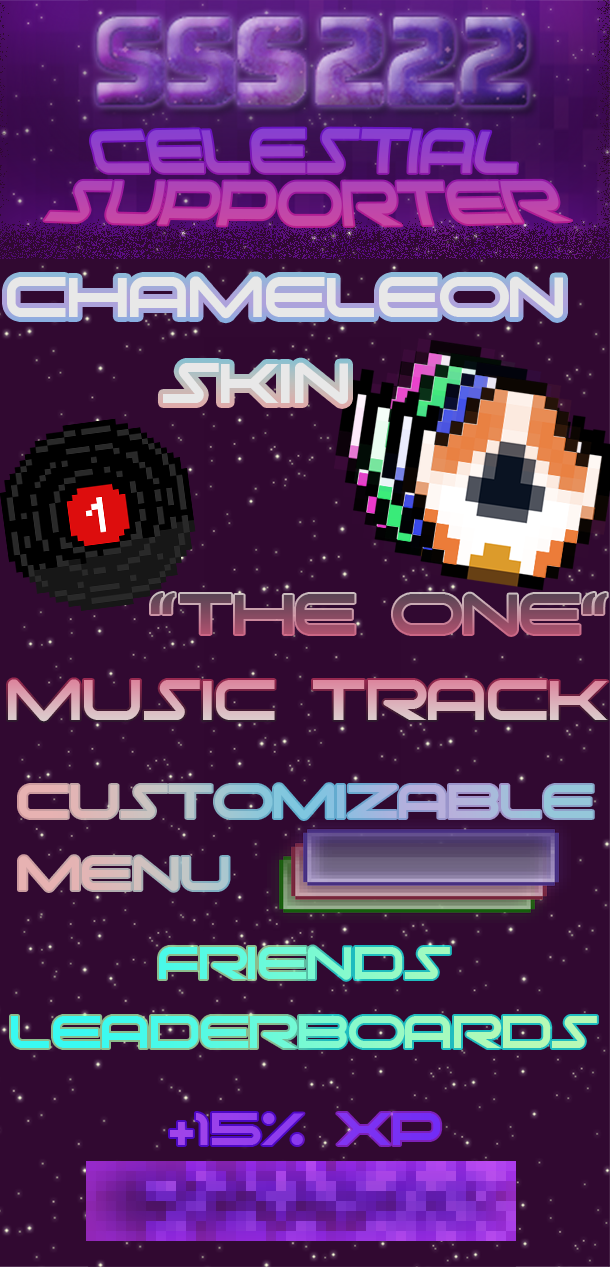
<style>
.page{position:relative;width:610px;height:1267px;background:#310931}
.page>*{position:absolute;margin:0}
.t1{font:72px/48px "moonhouse"}
.t2{font:72px "moonhouse";color:#dfdfdf}
.t3{font:72px "moonhouse"}
.t4{font:60px "moonhouse"}
.t5{font:58px "moonhouse"}
.t6{font:58px "moonhouse";color:#8e3bee}
</style>
<div class="page">
<p class="t1" style="left:44px;top:128px;width:528px;height:98px;text-align:center">CELESTIAL<br>SUPPORTER</p>
<p class="t2" style="left:7px;top:276px;width:556px;height:128px;text-align:center">CHAMELEON<br>SKIN</p>
<p class="t3" style="left:8px;top:593px;width:600px;height:129px;text-align:center">"THE ONE"<br>MUSIC TRACK</p>
<p class="t4" style="left:19px;top:784px;width:574px;height:107px">CUSTOMIZABLE<br>MENU</p>
<p class="t5" style="left:11px;top:946px;width:586px;height:102px;text-align:center">FRIENDS<br>LEADERBOARDS</p>
<p class="t6" style="left:170px;top:1113px;width:271px;height:32px">+15% XP</p>
</div>
